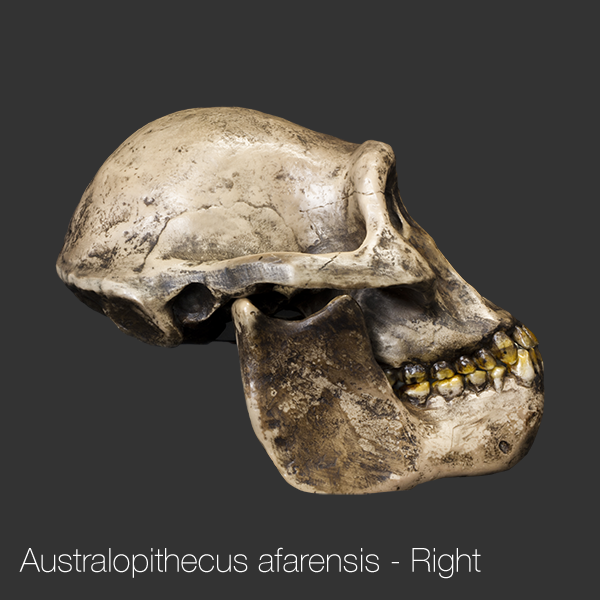
<style>
.page{position:relative;width:600px;height:600px;background:#333333}
.page>*{position:absolute;margin:0}
.t1{font:33.3px "HelveticaNeue-Thin";color:#ffffff}
</style>
<div class="page">
<p class="t1" style="left:19px;top:547px;width:462px;height:32px">Australopithecus afarensis - Right</p>
</div>
